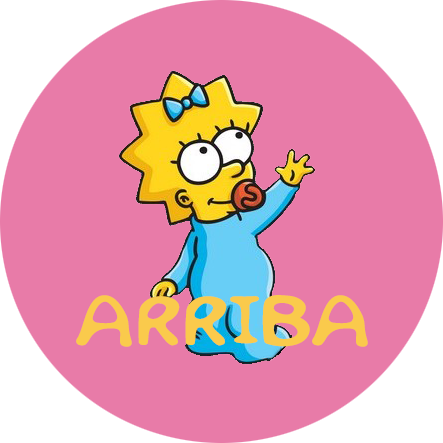
<style>
.page{position:relative;width:443px;height:443px;background:#e87ba8}
.page>*{position:absolute;margin:0}
.t1{font:60px "Simpsonfont";color:#faca4c;text-transform:uppercase;scale:1.25 1}
</style>
<div class="page">
<p class="t1" style="left:76px;top:295px;width:292px;height:52px">Arriba</p>
</div>
